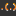
<style>
.page{position:relative;width:16px;height:16px;background:#333333}
.page>*{position:absolute;margin:0}
.t1{font:7px "LucidaSans-Typewriter"}
</style>
<div class="page">
<p class="t1" style="left:1px;top:4px;width:15px;height:7px">.(.)</p>
<p class="t1" style="left:1px;top:3px;width:15px;height:7px">.(.)</p>
</div>
